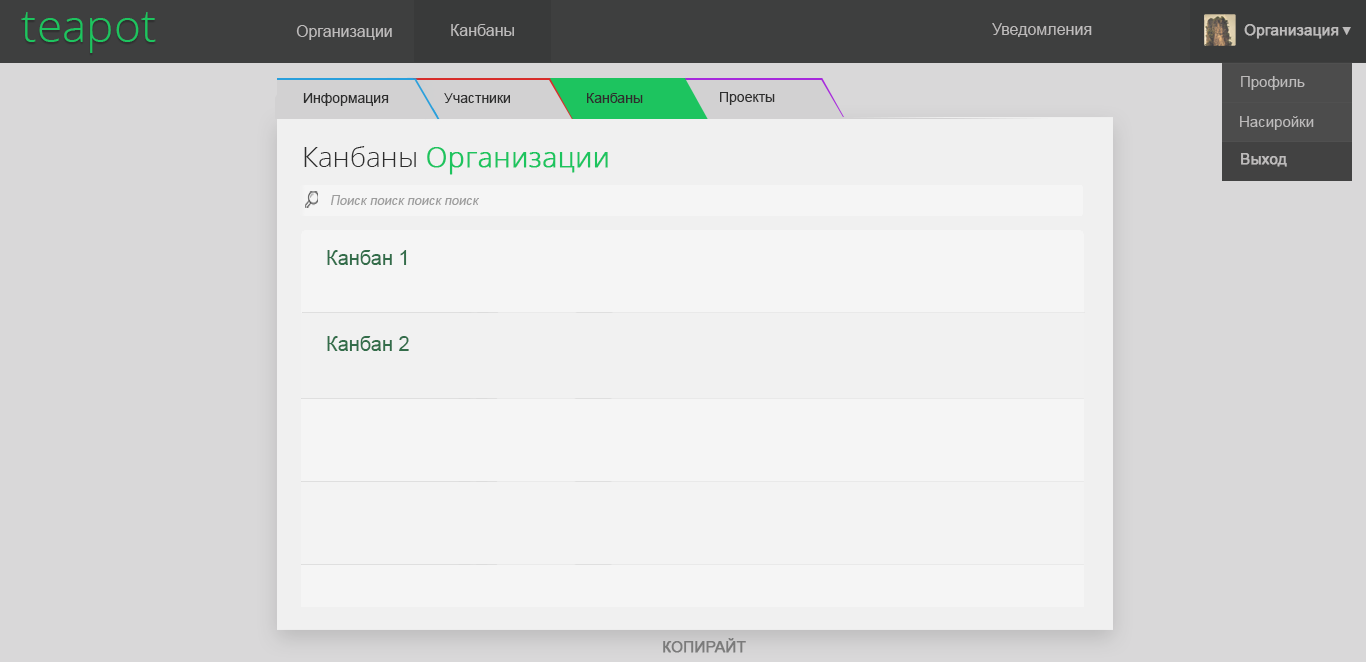
<style>
.page{position:relative;width:1366px;height:662px;background:#d9d8d9}
.page>*{position:absolute;margin:0}
.t1{font:46px "OpenSans-Light";color:#1dc45f}
.t2{font:16px "ArialMT";color:#bdbbbb}
.t3{font:15px "ArialMT";color:#bdbbbb;font-weight:bold}
.t4{font:12.3px "ArialMT";color:#bdbbbb}
.t5{font:15px "ArialMT";color:#bdbbbb}
.t6{font:14px "ArialMT";color:#2e2e2e}
.t7{font:28px "OpenSans-Light";color:#1dc45f;font-weight:bold}
.t8{font:28px "OpenSans-Light";color:#2e2e2e}
.t9{font:13px "ArialMT";color:#9c9c9c;font-style:italic}
.t10{font:20px "ArialMT";color:#336d4a}
.t11{font:15px "ArialMT";color:#7b7a7a;font-weight:bold}
</style>
<div class="page">
<p class="t1" style="left:21px;top:12px;width:135px;height:41px">teapot</p>
<p class="t2" style="left:296px;top:25px;width:96px;height:15px">Организации</p>
<p class="t2" style="left:451px;top:24px;width:63px;height:12px">Канбаны</p>
<p class="t2" style="left:992px;top:23px;width:100px;height:14px">Уведомления</p>
<p class="t3" style="left:1244px;top:24px;width:95px;height:15px">Организация</p>
<p class="t4" style="left:1342px;top:27px;width:9px;height:8px">▼</p>
<p class="t5" style="left:1241px;top:76px;width:64px;height:14px">Профиль</p>
<p class="t6" style="left:303px;top:93px;width:86px;height:13px">Информация</p>
<p class="t6" style="left:444px;top:93px;width:66px;height:10px">Участники</p>
<p class="t6" style="left:587px;top:93px;width:56px;height:10px">Канбаны</p>
<p class="t6" style="left:720px;top:92px;width:55px;height:13px">Проекты</p>
<p class="t5" style="left:1240px;top:116px;width:74px;height:14px">Насиройки</p>
<p class="t7" style="left:304px;top:146px;width:304px;height:29px"><span class="t8">Канбаны </span>Организации</p>
<p class="t3" style="left:1241px;top:153px;width:46px;height:14px">Выход</p>
<p class="t9" style="left:331px;top:195px;width:148px;height:10px">Поиск поиск поиск поиск</p>
<p class="t10" style="left:327px;top:250px;width:80px;height:15px">Канбан 1</p>
<p class="t10" style="left:327px;top:336px;width:82px;height:15px">Канбан 2</p>
<p class="t11" style="left:663px;top:638px;width:83px;height:15px">КОПИРАЙТ</p>
</div>
